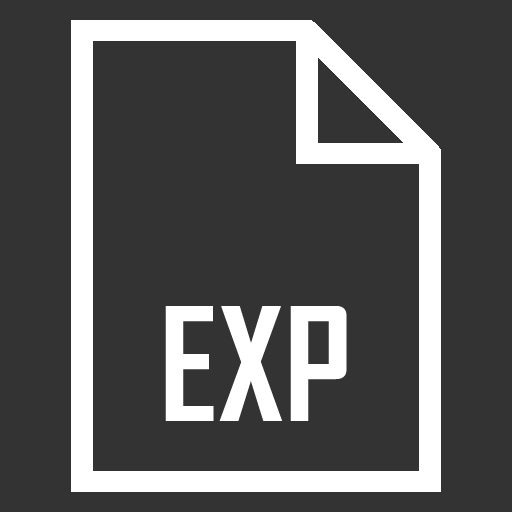
<style>
.page{position:relative;width:512px;height:512px;background:#333333}
.page>*{position:absolute;margin:0}
.t1{font:150px "AgencyFB-Bold";color:#ffffff}
</style>
<div class="page">
<p class="t1" style="left:165px;top:306px;width:182px;height:115px">EXP</p>
</div>
